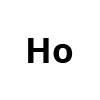
<style>
.page{position:relative;width:100px;height:100px;background:#ffffff}
.page>*{position:absolute;margin:0}
.t1{font:35px "OpenSans-Bold";color:#000000}
</style>
<div class="page">
<p class="t1" style="left:28px;top:38px;width:45px;height:25px">Ho</p>
</div>
